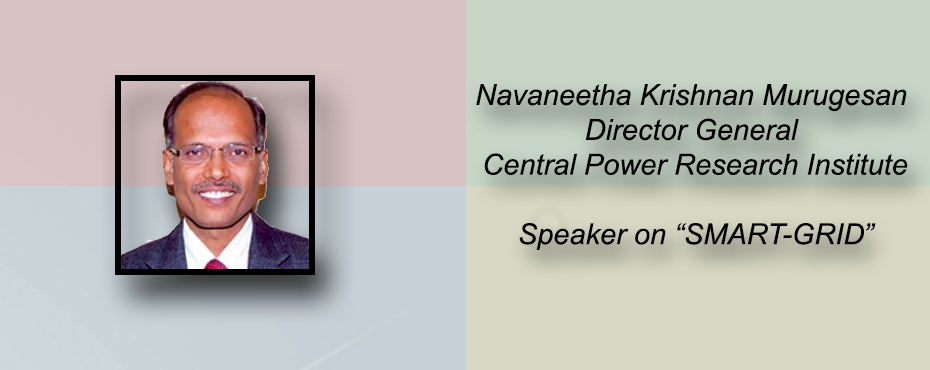
<style>
.page{position:relative;width:930px;height:370px}
.page>*{position:absolute;margin:0}
.t1{font:29px "Arial-ItalicMT";color:#000000}
</style>
<div class="page">
<p class="t1" style="left:476px;top:84px;width:432px;height:166px;text-align:center">Navaneetha Krishnan Murugesan<br>Director General<br>Central Power Research Institute <br><br>Speaker on “SMART-GRID</p>
<p class="t1" style="left:866px;top:223px;width:10px;height:8px">“</p>
</div>
